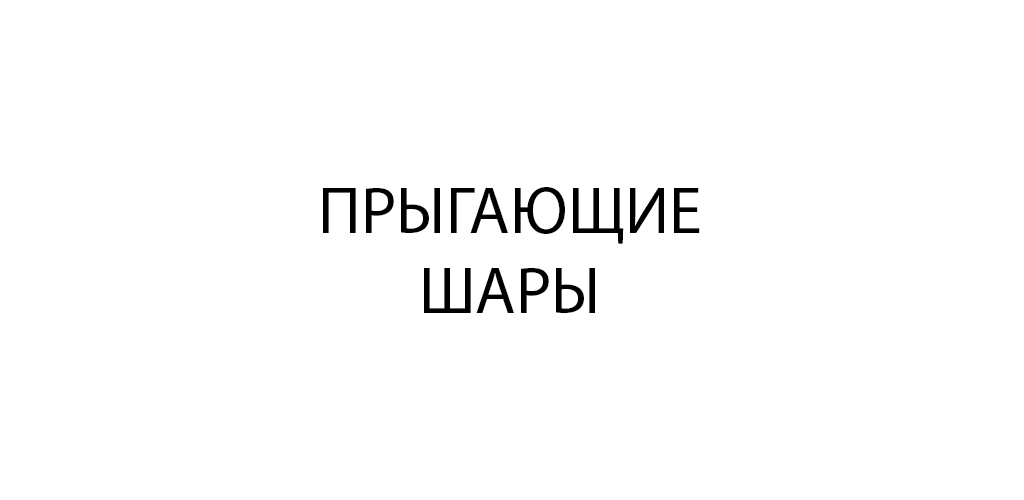
<style>
.page{position:relative;width:1024px;height:500px;background:#ffffff}
.page>*{position:absolute;margin:0}
.t1{font:66.7px "MyriadPro-Regular";color:#000000}
</style>
<div class="page">
<p class="t1" style="left:323px;top:187px;width:377px;height:126px;text-align:center">ПРЫГАЮЩИЕ<br>ШАРЫ</p>
</div>
